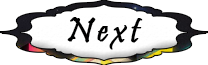
<style>
.page{position:relative;width:208px;height:65px;background:#ffffff}
.page>*{position:absolute;margin:0}
.t1{font:36px "Pristina-Regular";letter-spacing:0.125em;color:#000000;font-weight:bold}
.t2{font:36px "Pristina-Regular";letter-spacing:0.125em;font-weight:bold}
</style>
<div class="page">
<p class="t1" style="left:67px;top:17px;width:76px;height:33px">Next</p>
<p class="t2" style="left:69px;top:17px;width:76px;height:33px">Next</p>
</div>
